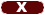
<style>
.page{position:relative;width:45px;height:15px;background:#5f0505}
.page>*{position:absolute;margin:0}
.t1{font:14px "Arial-Black";color:#ffffff}
</style>
<div class="page">
<p class="t1" style="left:16px;top:2px;width:11px;height:10px">X</p>
</div>
